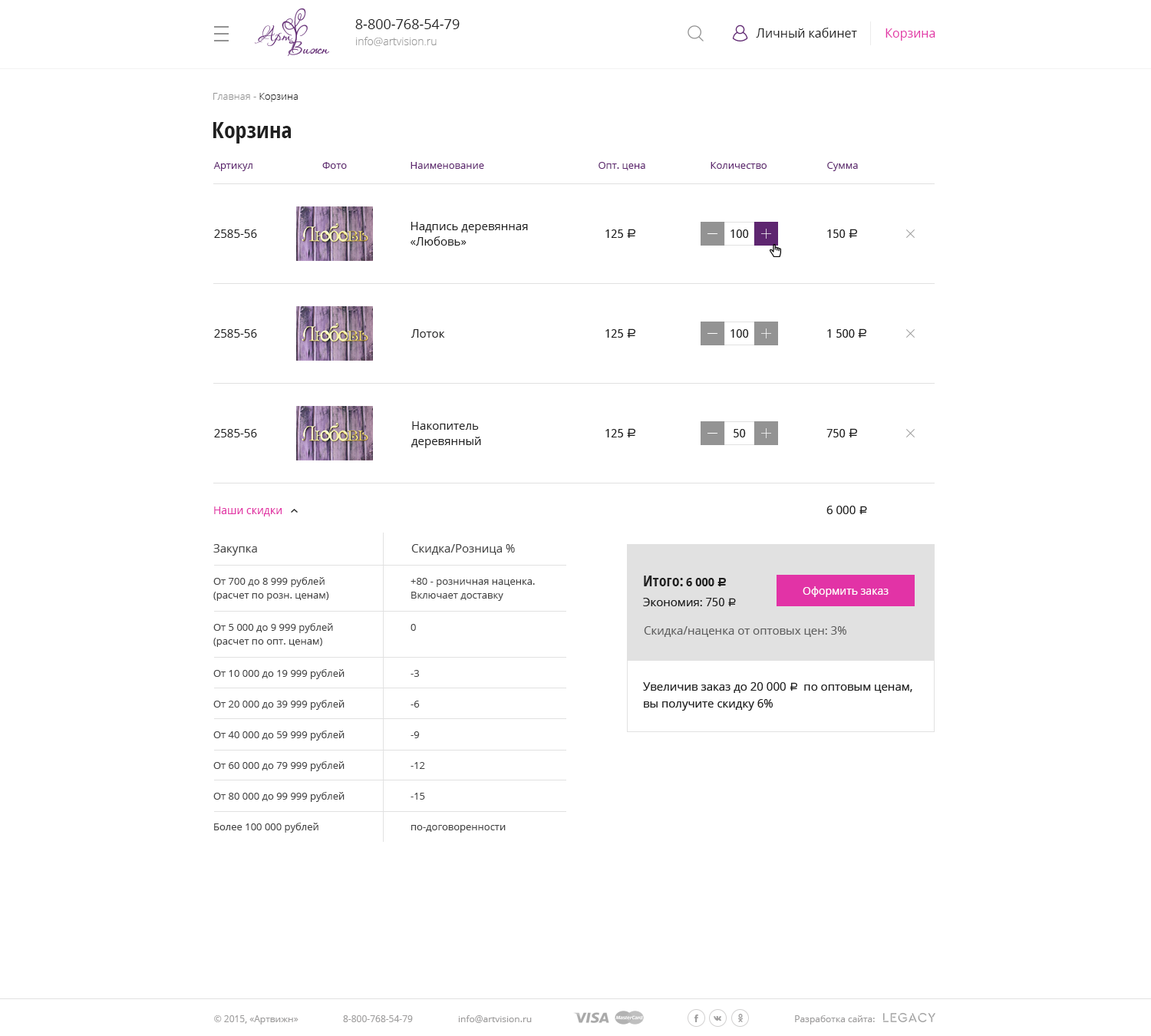
<style>
.page{position:relative;width:1151px;height:1036px;background:#ffffff}
.page>*{position:absolute;margin:0}
.t1{font:13.8px "OpenSans";color:#202020}
.t2{font:12.3px "OpenSans";color:#202020}
.t3{font:12.3px "OpenSans";color:#e233a6}
.t4{font:10.7px "OpenSans-Light";color:#999999}
.t5{font:10px "OpenSans-Light";color:#939393}
.t6{font:10px "OpenSans-Light";color:#202020}
.t7{font:23px "OpenSans-CondensedBold";color:#202020}
.t8{font:10px "OpenSans";color:#5e2670}
.t9{font:11.5px/15.3px "OpenSans";color:#202020}
.t10{font:11.5px "OpenSans";color:#202020}
.t11{font:11.5px "DroidSans";color:#202020}
.t12{font:12.3px "ALSRubl";color:#202020}
.t13{font:10.7px "OpenSans";color:#e233a6}
.t14{font:11.5px "ALSRubl";color:#202020}
.t15{font:11.5px "OpenSans";color:#444444}
.t16{font:10px/16.9px "OpenSans";color:#444444}
.t17{font:10px/13.8px "OpenSans";color:#444444}
.t18{font:10px/18.4px "OpenSans";color:#444444}
.t19{font:15.3px "OpenSans-CondensedBold";color:#202020}
.t20{font:11.5px "DroidSans-Bold";color:#1f1f1f}
.t21{font:12.3px "ALSRubl";color:#1f1f1f}
.t22{font:10.7px "OpenSans";color:#ffffff}
.t23{font:11.5px "OpenSans";color:#5d5d5d}
.t24{font:11.5px/16.9px "OpenSans";color:#202020}
.t25{font:11.5px/16.9px "ALSRubl";color:#202020}
.t26{font:9.2px "OpenSans";color:#9e9d9d}
</style>
<div class="page">
<p class="t1" style="left:355px;top:19px;width:105px;height:10px">8-800-768-54-79</p>
<p class="t2" style="left:756px;top:28px;width:101px;height:10px">Личный кабинет</p>
<p class="t3" style="left:886px;top:28px;width:49px;height:13px">Корзина</p>
<p class="t4" style="left:356px;top:37px;width:81px;height:9px">info@artvision.ru</p>
<p class="t5" style="left:213px;top:93px;width:85px;height:9px">Главная - <span class="t6">Корзина</span></p>
<p class="t7" style="left:213px;top:122px;width:78px;height:21px">Корзина</p>
<p class="t8" style="left:213px;top:162px;width:39px;height:9px">Артикул</p>
<p class="t8" style="left:322px;top:162px;width:25px;height:7px">Фото</p>
<p class="t8" style="left:411px;top:162px;width:73px;height:7px">Наименование</p>
<p class="t8" style="left:599px;top:162px;width:46px;height:8px">Опт. цена</p>
<p class="t8" style="left:711px;top:162px;width:56px;height:7px">Количество</p>
<p class="t8" style="left:827px;top:162px;width:31px;height:9px">Сумма</p>
<p class="t9" style="left:411px;top:222px;width:117px;height:24px">Надпись деревянная <br>«Любовь»</p>
<p class="t10" style="left:214px;top:229px;width:43px;height:9px">2585-56</p>
<p class="t11" style="left:605px;top:229px;width:30px;height:9px">125 <span class="t12">a</span></p>
<p class="t11" style="left:731px;top:229px;width:18px;height:9px">100</p>
<p class="t11" style="left:827px;top:229px;width:30px;height:9px">150 <span class="t12">a</span></p>
<p class="t10" style="left:214px;top:329px;width:43px;height:9px">2585-56</p>
<p class="t10" style="left:411px;top:329px;width:34px;height:9px">Лоток</p>
<p class="t11" style="left:605px;top:328px;width:30px;height:10px">125 <span class="t12">a</span></p>
<p class="t11" style="left:731px;top:329px;width:18px;height:9px">100</p>
<p class="t11" style="left:827px;top:328px;width:39px;height:10px">1 500 <span class="t12">a</span></p>
<p class="t9" style="left:411px;top:421px;width:70px;height:27px">Накопитель<br>деревянный</p>
<p class="t10" style="left:214px;top:429px;width:43px;height:8px">2585-56</p>
<p class="t11" style="left:605px;top:428px;width:30px;height:9px">125 <span class="t12">a</span></p>
<p class="t11" style="left:734px;top:429px;width:12px;height:8px">50</p>
<p class="t11" style="left:826px;top:428px;width:31px;height:9px">750 <span class="t12">a</span></p>
<p class="t13" style="left:214px;top:506px;width:68px;height:10px">Наши скидки</p>
<p class="t10" style="left:826px;top:506px;width:41px;height:8px">6 000 <span class="t14">a</span></p>
<p class="t15" style="left:213px;top:544px;width:44px;height:12px">Закупка</p>
<p class="t15" style="left:411px;top:544px;width:104px;height:11px">Скидка/Розница %</p>
<p class="t16" style="left:213px;top:577px;width:132px;height:256px"><span class="t17"><br><br>От 700 до 8 999 рублей <br>(расчет по розн. ценам) <br><br></span><span class="t18">От 5 000 до 9 999 рублей <br></span><span class="t17">(расчет по опт. ценам) <br><br></span><span class="t18">От 10 000 до 19 999 рублей<br> <br></span>От 20 000 до 39 999 рублей <br><br>От 40 000 до 59 999 рублей <br><br>От 60 000 до 79 999 рублей <br><br>От 80 000 до 99 999 рублей <br><br>Более 100 000 рублей</p>
<p class="t17" style="left:411px;top:578px;width:124px;height:255px">+80 - розничная наценка. <br>Включает доставку <br><br><span class="t18">0<br><br><br>-3<br> <br></span><span class="t16">-6<br><br>-9<br><br>-12<br><br>-15<br><br>по-договоренности</span></p>
<p class="t19" style="left:644px;top:576px;width:39px;height:10px">Итого:</p>
<p class="t20" style="left:686px;top:578px;width:40px;height:8px">6 000 <span class="t21">c</span></p>
<p class="t22" style="left:803px;top:586px;width:86px;height:11px">Оформить заказ</p>
<p class="t10" style="left:643px;top:598px;width:93px;height:8px">Экономия: <span class="t11">750 </span><span class="t14">a</span></p>
<p class="t23" style="left:644px;top:626px;width:202px;height:11px">Скидка/наценка от оптовых цен: 3%</p>
<p class="t24" style="left:643px;top:682px;width:269px;height:29px">Увеличив заказ до 20 000 <span class="t25">a </span>по оптовым ценам, <br>вы получите скидку 6%</p>
<p class="t26" style="left:214px;top:1015px;width:85px;height:9px">© 2015, «Артвижн»</p>
<p class="t26" style="left:343px;top:1015px;width:70px;height:7px">8-800-768-54-79</p>
<p class="t26" style="left:458px;top:1015px;width:74px;height:8px">info@artvision.ru</p>
<p class="t26" style="left:795px;top:1015px;width:80px;height:9px">Разработка сайта:</p>
</div>
